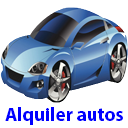
<style>
.page{position:relative;width:128px;height:128px;background:#ffffff}
.page>*{position:absolute;margin:0}
.t1{font:19px "MyriadPro-Bold";color:#0000ff}
</style>
<div class="page">
<p class="t1" style="left:5px;top:107px;width:118px;height:18px">Alquiler autos</p>
</div>
